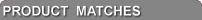
<style>
.page{position:relative;width:202px;height:20px;background:#858585}
.page>*{position:absolute;margin:0}
.t1{font:13.3px "Arial-BoldMT";color:#ffffff}
</style>
<div class="page">
<p class="t1" style="left:3px;top:5px;width:137px;height:11px">PRODUCT  MATCHES</p>
</div>
